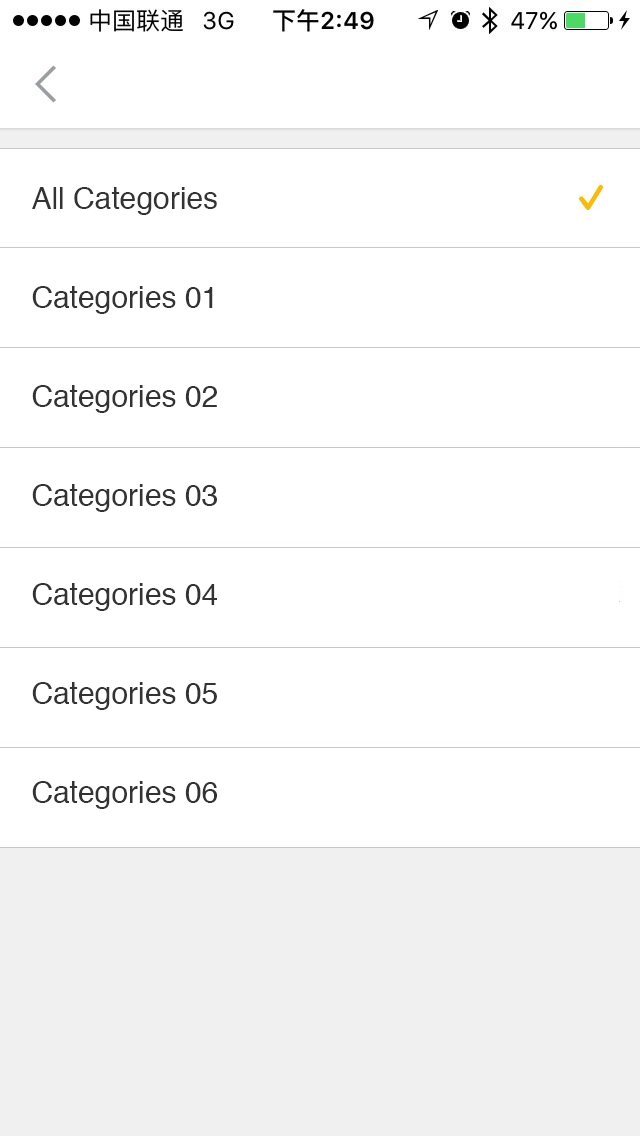
<style>
.page{position:relative;width:640px;height:1136px;background:#ffffff}
.page>*{position:absolute;margin:0}
.t1{font:30px/99px "Helvetica";color:#333333}
</style>
<div class="page">
<p class="t1" style="left:32px;top:187px;width:185px;height:622px">All Categories<br>Categories 01<br>Categories 02<br>Categories 03<br>Categories 04<br>Categories 05<br>Categories 06</p>
</div>
